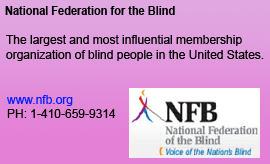
<style>
.page{position:relative;width:270px;height:164px}
.page>*{position:absolute;margin:0}
.t1{font:12px "Arial-BoldMT";color:#000000;scale:0.91 1}
.t2{font:12px "ArialMT";color:#000000}
.t3{font:12px "ArialMT";color:#001eff}
</style>
<div class="page">
<p class="t1" style="left:5px;top:6px;width:170px;height:9px">National Federation for the Blind</p>
<p class="t2" style="left:6px;top:35px;width:236px;height:11px">The largest and most influential membership</p>
<p class="t2" style="left:6px;top:50px;width:258px;height:11px">organization of blind people in the United States.</p>
<p class="t3" style="left:7px;top:95px;width:66px;height:11px">www.nfb.org</p>
<p class="t2" style="left:7px;top:109px;width:109px;height:9px">PH: 1-410-659-9314</p>
</div>
